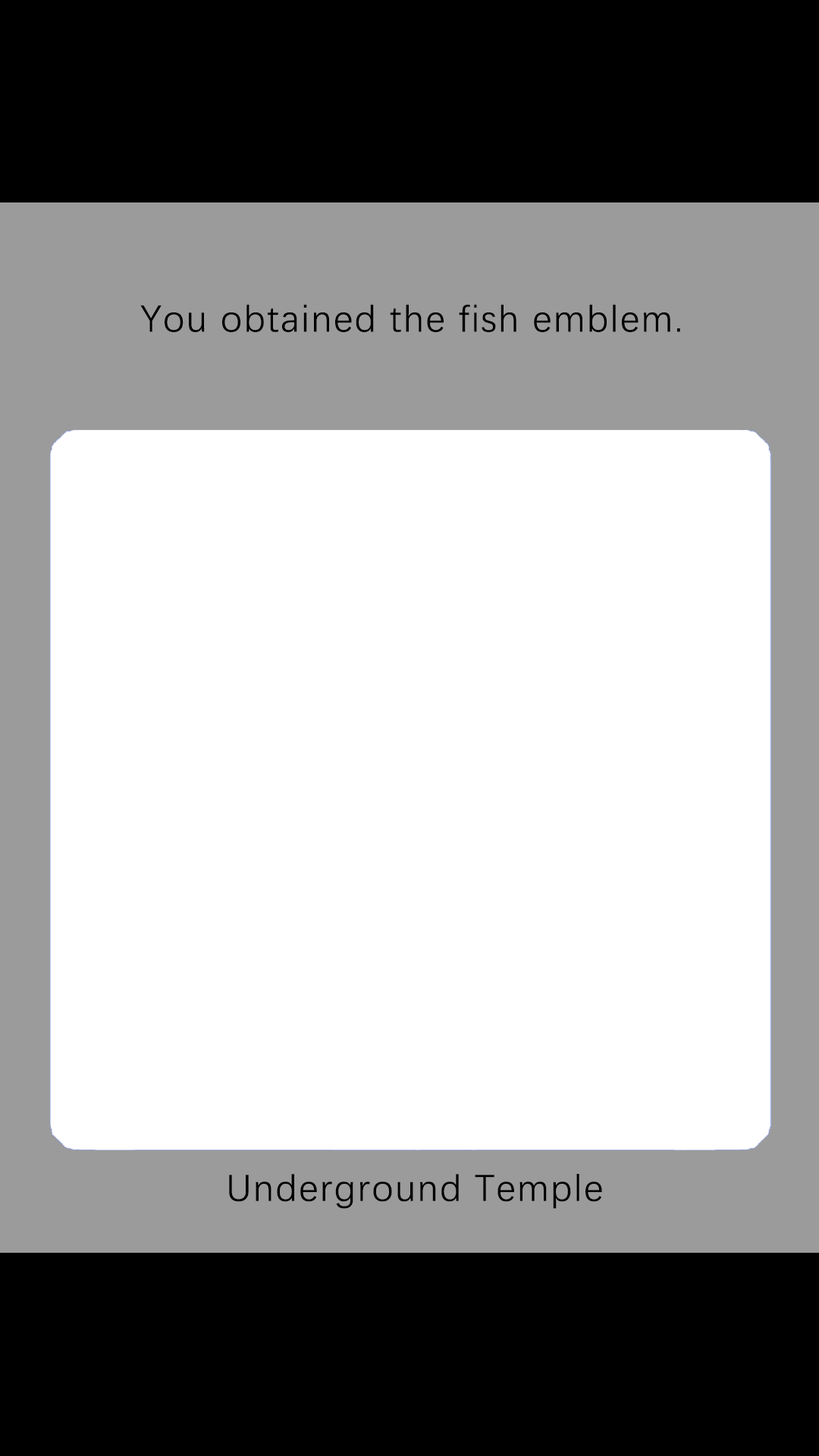
<style>
.page{position:relative;width:819px;height:1456px;background:#ffffff}
.page>*{position:absolute;margin:0}
.t1{font:37.9px "DengXian-Regular";letter-spacing:0.04em;color:#000000}
</style>
<div class="page">
<p class="t1" style="left:140px;top:304px;width:540px;height:28px">You obtained the fish emblem.</p>
<p class="t1" style="left:229px;top:1174px;width:373px;height:35px">Underground Temple</p>
</div>
